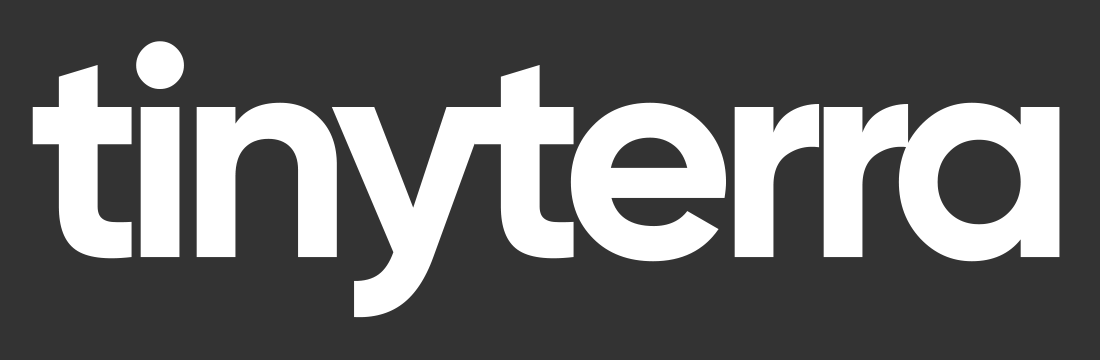
<style>
.page{position:relative;width:1100px;height:360px;background:#333333}
.page>*{position:absolute;margin:0}
.t1{font:300px "Gilroy-Bold";letter-spacing:-0.06em;color:#ffffff}
</style>
<div class="page">
<p class="t1" style="left:32px;top:41px;width:1028px;height:277px">tinyterra</p>
</div>
